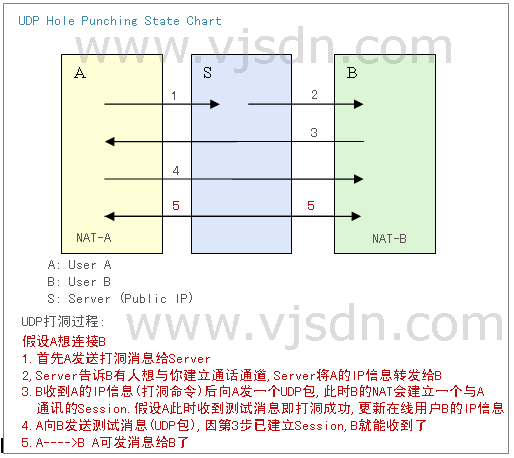
<style>
.page{position:relative;width:514px;height:458px;background:#ffffff}
.page>*{position:absolute;margin:0}
.t1{font:14px "SimHei";color:#3c8aae}
.t2{font:14px "SimHei";color:#585554}
.t3{font:14px "SimHei";color:#ba0a0a}
.t4{font:48px "Verdana";color:#dcdcdc}
</style>
<div class="page">
<p class="t1" style="left:19px;top:16px;width:202px;height:10px">UDP Hole Punching State Chart</p>
<p class="t2" style="left:172px;top:91px;width:3px;height:9px">1</p>
<p class="t2" style="left:312px;top:90px;width:5px;height:9px">2</p>
<p class="t2" style="left:311px;top:128px;width:6px;height:9px">3</p>
<p class="t2" style="left:173px;top:166px;width:6px;height:9px">4</p>
<p class="t3" style="left:173px;top:201px;width:6px;height:9px">5</p>
<p class="t3" style="left:308px;top:201px;width:6px;height:9px">5</p>
<p class="t2" style="left:77px;top:233px;width:34px;height:9px">NAT-A</p>
<p class="t2" style="left:373px;top:234px;width:33px;height:9px">NAT-B</p>
<p class="t2" style="left:48px;top:260px;width:144px;height:43px">A: User A<br>B: User B<br>S: Server (Public IP)</p>
<p class="t4" style="left:126px;top:303px;width:376px;height:47px">www.vjsdn.com</p>
<p class="t2" style="left:22px;top:315px;width:81px;height:12px">UDP打洞过程:</p>
<p class="t3" style="left:22px;top:335px;width:482px;height:113px">假设A想连接B<br>1.首先A发送打洞消息给Server<br>2,Server告诉B有人想与你建立通话通道,Server将A的IP信息转发给B<br>3.B收到A的IP信息(打洞命令)后向A发一个UDP包,此时B的NAT会建立一个与A<br>  通讯的Session.假设A此时收到测试消息即打洞成功,更新在线用户B的IP信息<br>4.A向B发送测试消息(UDP包),因第3步已建立Session,B就能收到了<br>5.A----&gt;B A可发消息给B了</p>
</div>
